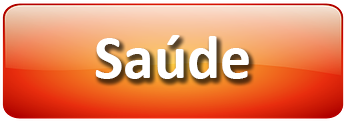
<style>
.page{position:relative;width:345px;height:121px}
.page>*{position:absolute;margin:0}
.t1{font:62px "Calibri-Bold";color:#ffffff}
</style>
<div class="page">
<p class="t1" style="left:95px;top:35px;width:154px;height:44px">Saúde</p>
</div>
